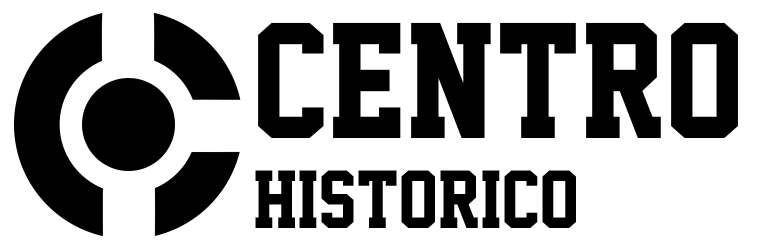
<style>
.page{position:relative;width:760px;height:250px;background:#ffffff}
.page>*{position:absolute;margin:0}
.t1{font:75px "SuperstarM54";color:#000000}
.t2{font:150px "SuperstarM54";color:#000000}
</style>
<div class="page">
<p class="t1" style="left:255px;top:22px;width:483px;height:206px"><span class="t2">Centro<br></span>Historico</p>
</div>
